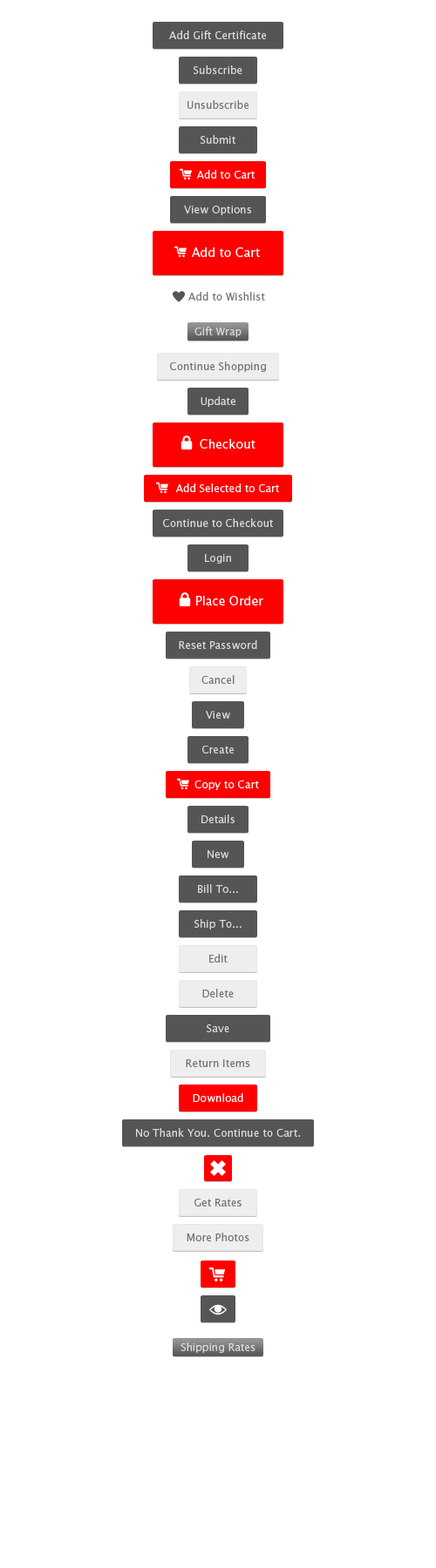
<style>
.page{position:relative;width:436px;height:1568px;background:#ffffff}
.page>*{position:absolute;margin:0}
.t1{font:10.5px "LucidaSans";color:#dbdbdb}
.t2{font:10.5px "LucidaSans";color:#757575}
.t3{font:10.5px "LucidaSans";color:#ffffff}
.t4{font:12.2px "LucidaSans";color:#ffffff}
</style>
<div class="page">
<p class="t1" style="left:169px;top:30px;width:97px;height:9px">Add Gift Certificate</p>
<p class="t1" style="left:193px;top:65px;width:49px;height:9px">Subscribe</p>
<p class="t2" style="left:187px;top:100px;width:61px;height:9px">Unsubscribe</p>
<p class="t1" style="left:200px;top:135px;width:35px;height:9px">Submit</p>
<p class="t3" style="left:196px;top:170px;width:58px;height:9px">Add to Cart</p>
<p class="t1" style="left:184px;top:206px;width:67px;height:9px">View Options</p>
<p class="t4" style="left:192px;top:247px;width:68px;height:10px">Add to Cart</p>
<p class="t2" style="left:188px;top:292px;width:77px;height:9px">Add to Wishlist</p>
<p class="t1" style="left:194px;top:327px;width:47px;height:10px">Gift Wrap</p>
<p class="t2" style="left:170px;top:362px;width:96px;height:10px">Continue Shopping</p>
<p class="t1" style="left:200px;top:396px;width:35px;height:11px">Update</p>
<p class="t4" style="left:199px;top:439px;width:56px;height:10px">Checkout</p>
<p class="t3" style="left:175px;top:483px;width:104px;height:9px">Add Selected to Cart</p>
<p class="t1" style="left:163px;top:518px;width:110px;height:9px">Continue to Checkout</p>
<p class="t1" style="left:205px;top:554px;width:26px;height:10px">Login</p>
<p class="t4" style="left:196px;top:596px;width:67px;height:9px">Place Order</p>
<p class="t1" style="left:179px;top:640px;width:78px;height:9px">Reset Password</p>
<p class="t2" style="left:201px;top:675px;width:33px;height:9px">Cancel</p>
<p class="t1" style="left:206px;top:711px;width:24px;height:8px">View</p>
<p class="t1" style="left:202px;top:746px;width:31px;height:8px">Create</p>
<p class="t3" style="left:194px;top:781px;width:65px;height:9px">Copy to Cart</p>
<p class="t1" style="left:201px;top:814px;width:33px;height:9px">Details</p>
<p class="t1" style="left:207px;top:850px;width:22px;height:8px">New</p>
<p class="t1" style="left:198px;top:884px;width:40px;height:9px">Bill To...</p>
<p class="t1" style="left:194px;top:919px;width:47px;height:10px">Ship To...</p>
<p class="t2" style="left:209px;top:954px;width:18px;height:9px">Edit</p>
<p class="t2" style="left:202px;top:989px;width:31px;height:8px">Delete</p>
<p class="t1" style="left:206px;top:1024px;width:23px;height:8px">Save</p>
<p class="t2" style="left:186px;top:1059px;width:64px;height:8px">Return Items</p>
<p class="t3" style="left:193px;top:1093px;width:50px;height:9px">Download</p>
<p class="t1" style="left:136px;top:1128px;width:164px;height:9px">No Thank You. Continue to Cart.</p>
<p class="t2" style="left:194px;top:1199px;width:47px;height:7px">Get Rates</p>
<p class="t2" style="left:186px;top:1233px;width:63px;height:8px">More Photos</p>
<p class="t1" style="left:180px;top:1342px;width:75px;height:11px">Shipping Rates</p>
</div>
